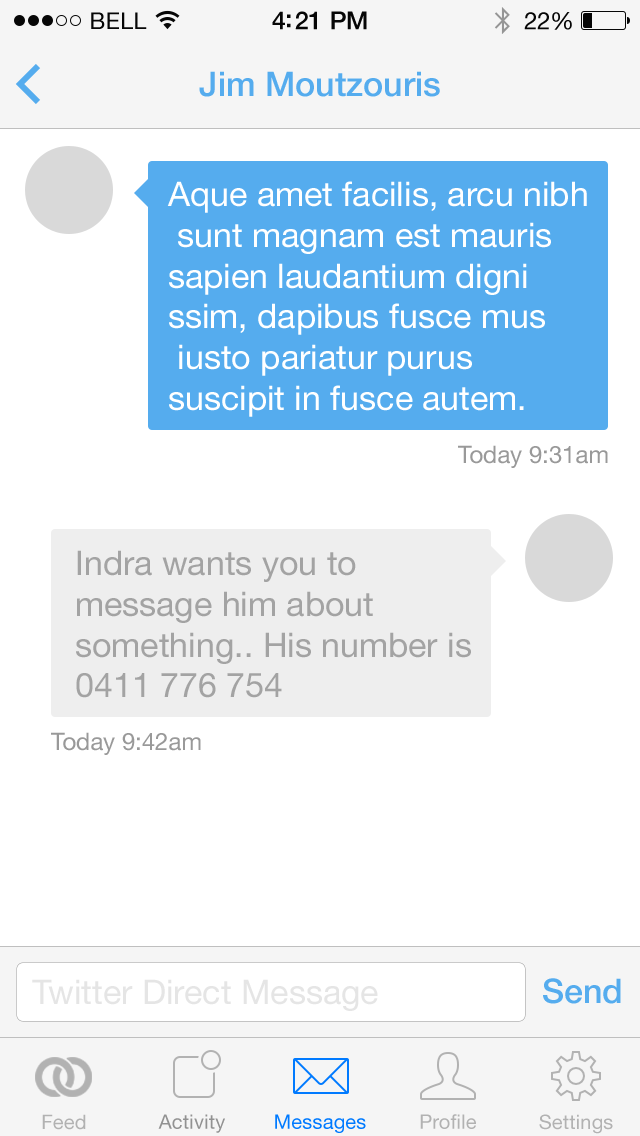
<style>
.page{position:relative;width:640px;height:1136px;background:#ffffff}
.page>*{position:absolute;margin:0}
.t1{font:23px "HelveticaNeue";letter-spacing:0.02em;color:#060606}
.t2{font:25px "HelveticaNeue-Medium";letter-spacing:-0.02em;color:#060606}
.t3{font:24px "HelveticaNeue";letter-spacing:-0.02em;color:#060606}
.t4{font:34px "HelveticaNeue-Medium";color:#55acee}
.t5{font:34px "HelveticaNeue";color:#ffffff}
.t6{font:24px "HelveticaNeue";color:#999999}
.t7{font:34px "HelveticaNeue";color:#a3a3a3}
.t8{font:34px "HelveticaNeue";color:#e5e5e5}
.t9{font:20px "HelveticaNeue";letter-spacing:0.01em;color:#b2b2b2}
.t10{font:20px "HelveticaNeue";letter-spacing:0.01em;color:#929292}
.t11{font:20px "HelveticaNeue";letter-spacing:0.01em;color:#007aff}
</style>
<div class="page">
<p class="t1" style="left:91px;top:12px;width:56px;height:17px">BELL</p>
<p class="t2" style="left:272px;top:11px;width:95px;height:19px">4:21 PM</p>
<p class="t3" style="left:524px;top:12px;width:48px;height:18px">22%</p>
<p class="t4" style="left:199px;top:71px;width:241px;height:26px">Jim Moutzouris</p>
<p class="t5" style="left:167px;top:181px;width:420px;height:236px">Aque amet facilis, arcu nibh<br> sunt magnam est mauris <br>sapien laudantium digni<br>ssim, dapibus fusce mus<br> iusto pariatur purus <br>suscipit in fusce autem.</p>
<p class="t6" style="left:458px;top:445px;width:150px;height:23px">Today 9:31am</p>
<p class="t7" style="left:76px;top:550px;width:395px;height:148px">Indra wants you to<br>message him about<br>something.. His number is<br>0411 776 754</p>
<p class="t6" style="left:51px;top:732px;width:150px;height:23px">Today 9:42am</p>
<p class="t8" style="left:32px;top:979px;width:346px;height:32px">Twitter Direct Message</p>
<p class="t4" style="left:543px;top:978px;width:78px;height:26px">Send</p>
<p class="t9" style="left:42px;top:1114px;width:44px;height:16px">Feed</p>
<p class="t10" style="left:158px;top:1114px;width:67px;height:19px">Activity</p>
<p class="t11" style="left:275px;top:1114px;width:91px;height:19px">Messages</p>
<p class="t9" style="left:420px;top:1114px;width:56px;height:15px">Profile</p>
<p class="t9" style="left:539px;top:1114px;width:74px;height:20px">Settings</p>
</div>
